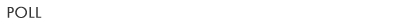
<style>
.page{position:relative;width:400px;height:24px;background:#ffffff}
.page>*{position:absolute;margin:0}
.t1{font:14.7px "FuturaBT-Light";letter-spacing:0.025em;color:#363636;text-transform:uppercase;font-weight:bold}
</style>
<div class="page">
<p class="t1" style="left:7px;top:6px;width:35px;height:12px">POLL</p>
</div>
